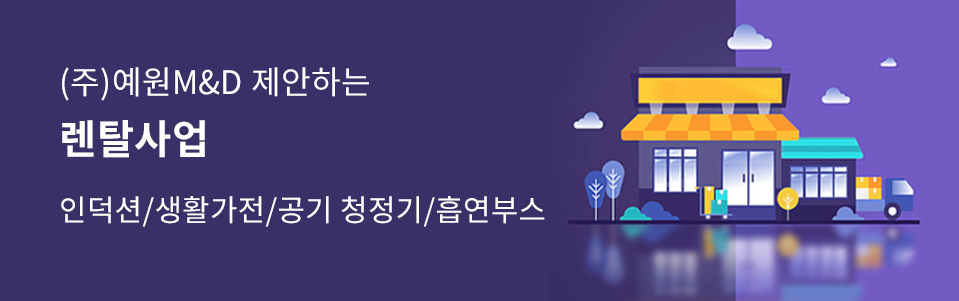
<style>
.page{position:relative;width:959px;height:301px;background:#3a2f67}
.page>*{position:absolute;margin:0}
.t1{font:32.4px/60px "NotoSansCJKkr-Regular";letter-spacing:0.01em;color:#ffffff}
.t2{font:40.6px/60px "NotoSansCJKkr-Bold";letter-spacing:0.01em;color:#ffffff}
.t3{font:30px "NotoSansCJKkr-Regular";letter-spacing:0.01em;color:#ffffff}
</style>
<div class="page">
<p class="t1" style="left:62px;top:67px;width:307px;height:91px">(주)예원M&amp;D 제안하는<br><span class="t2">렌탈사업</span></p>
<p class="t3" style="left:61px;top:196px;width:484px;height:31px">인덕션/생활가전/공기 청정기/흡연부스</p>
</div>
